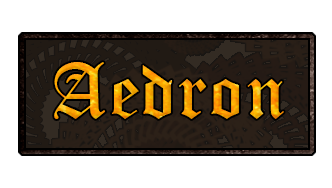
<style>
.page{position:relative;width:332px;height:188px;background:#ffffff}
.page>*{position:absolute;margin:0}
.t1{font:77.5px "OldEnglishTextMT";letter-spacing:0.02em;color:#faa302}
</style>
<div class="page">
<p class="t1" style="left:54px;top:62px;width:230px;height:57px">Aedron</p>
</div>
